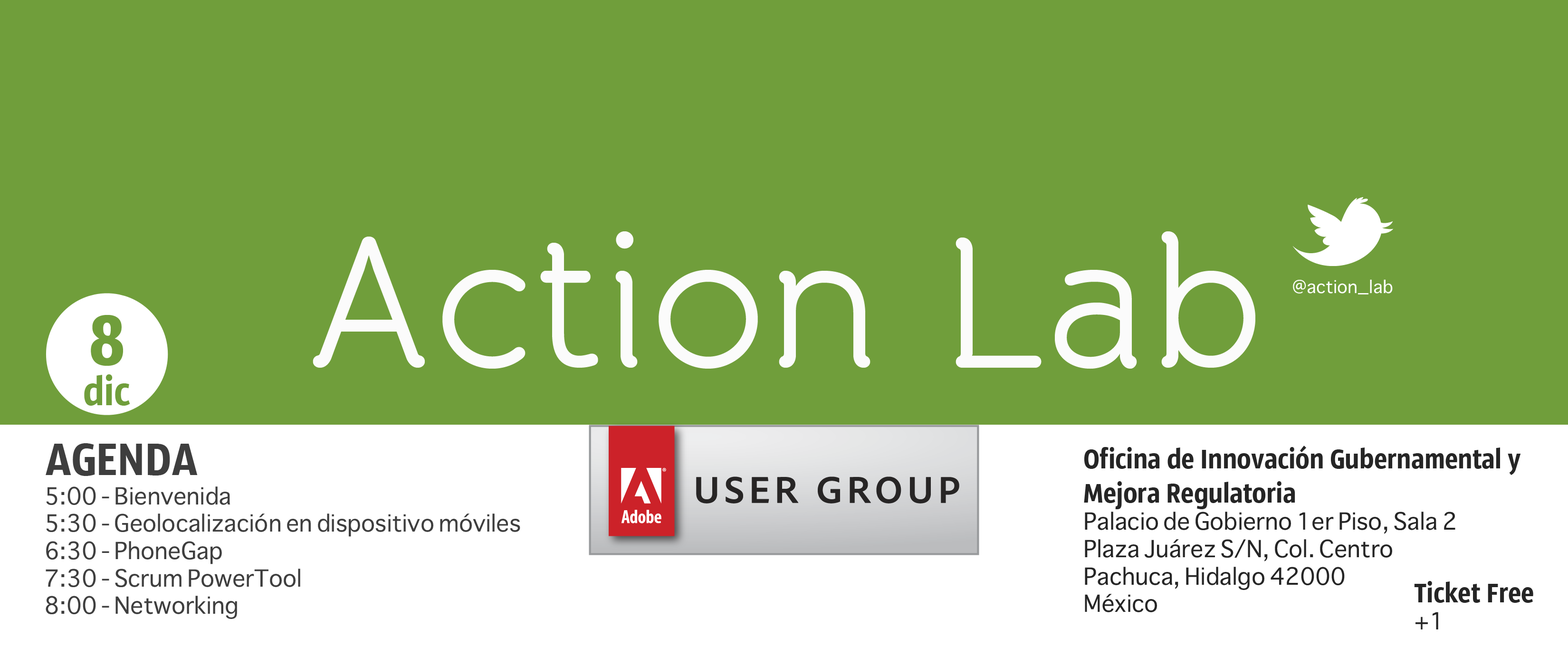
<style>
.page{position:relative;width:1568px;height:647px;background:#709e3b}
.page>*{position:absolute;margin:0}
.t1{font:186.3px "BandaRegular";color:#fbfbfb}
.t2{font:17.1px "Sathu";color:#ffffff}
.t3{font:74.6px "SansusWebissimo";color:#709e3b}
.t4{font:41.4px "SansusWebissimo";color:#709e3b}
.t5{font:47.5px "SansusWebissimo";color:#3e3e3e}
.t6{font:22.8px "Sathu";color:#252525}
.t7{font:28.5px "SansusWebissimo";color:#252525}
.t8{font:22.8px "Sathu";color:#3e3e3e}
</style>
<div class="page">
<p class="t1" style="left:313px;top:231px;width:942px;height:138px">Action Lab</p>
<p class="t2" style="left:1293px;top:279px;width:100px;height:16px">@action_lab</p>
<p class="t3" style="left:91px;top:315px;width:32px;height:51px">8</p>
<p class="t4" style="left:84px;top:374px;width:46px;height:32px">dic</p>
<p class="t5" style="left:46px;top:443px;width:152px;height:33px">AGENDA</p>
<p class="t6" style="left:1084px;top:446px;width:437px;height:166px"><span class="t7">Oficina de Innovación Gubernamental y <br>Mejora Regulatoria<br></span>Palacio de Gobierno 1er Piso, Sala 2 <br>Plaza Juárez S/N, Col. Centro<br>Pachuca, Hidalgo 42000<br>México</p>
<p class="t8" style="left:46px;top:487px;width:474px;height:132px">5:00 - Bienvenida<br>5:30 - Geolocalización en dispositivo móviles<br>6:30 - PhoneGap<br>7:30 - Scrum PowerTool<br>8:00 - Networking</p>
<p class="t7" style="left:1414px;top:581px;width:119px;height:49px">Ticket Free<br><span class="t6">+1</span></p>
</div>
